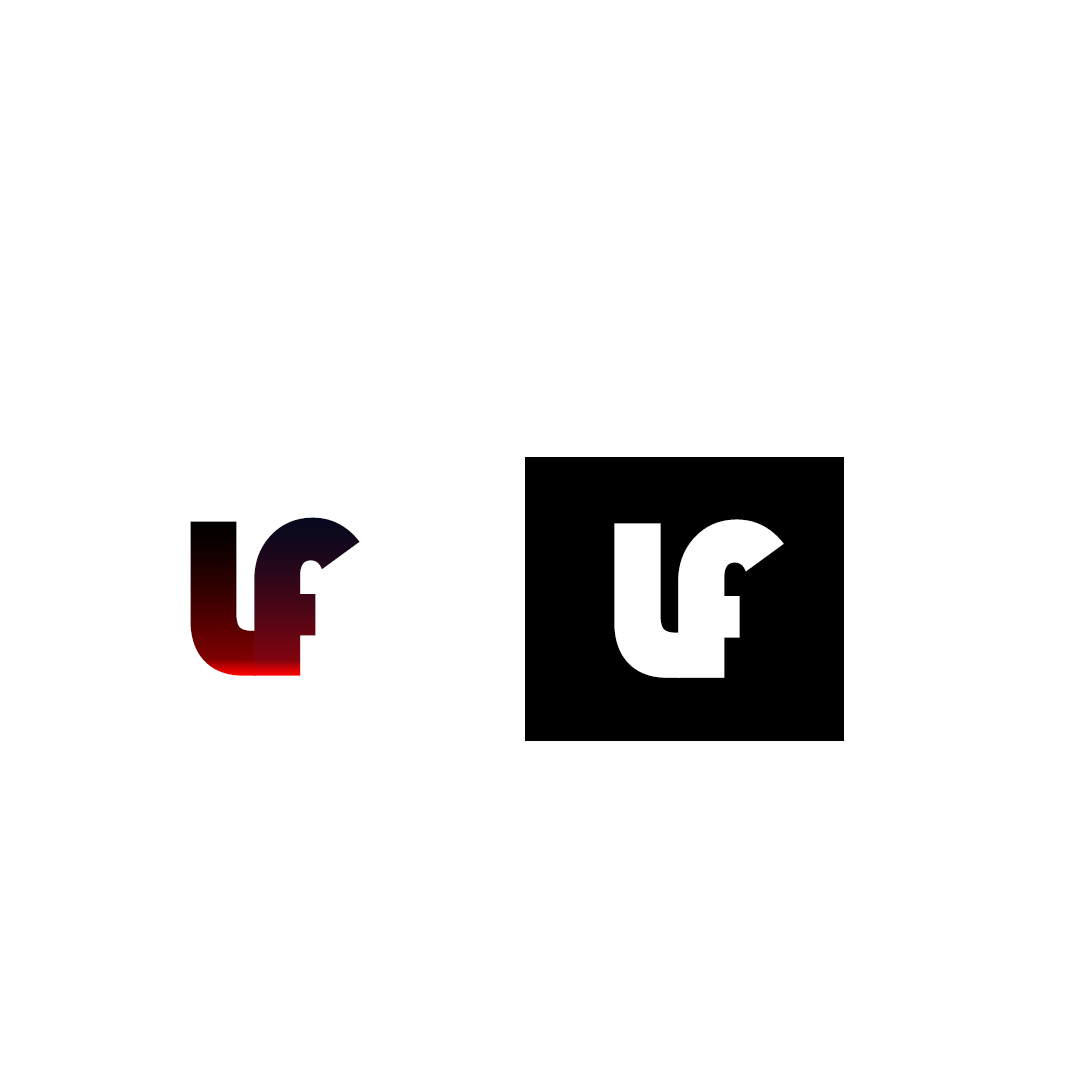
<style>
.page{position:relative;width:1080px;height:1080px;background:#ffffff}
.page>*{position:absolute;margin:0}
.t1{font:231px "Bauhaus93"}
.t2{font:231px "Bauhaus93";color:#ffffff}
</style>
<div class="page">
<p class="t1" style="left:190px;top:521px;width:66px;height:155px">L</p>
<p class="t1" style="left:254px;top:517px;width:106px;height:159px">F</p>
<p class="t2" style="left:678px;top:519px;width:106px;height:159px">F</p>
<p class="t2" style="left:614px;top:523px;width:66px;height:155px">L</p>
</div>
